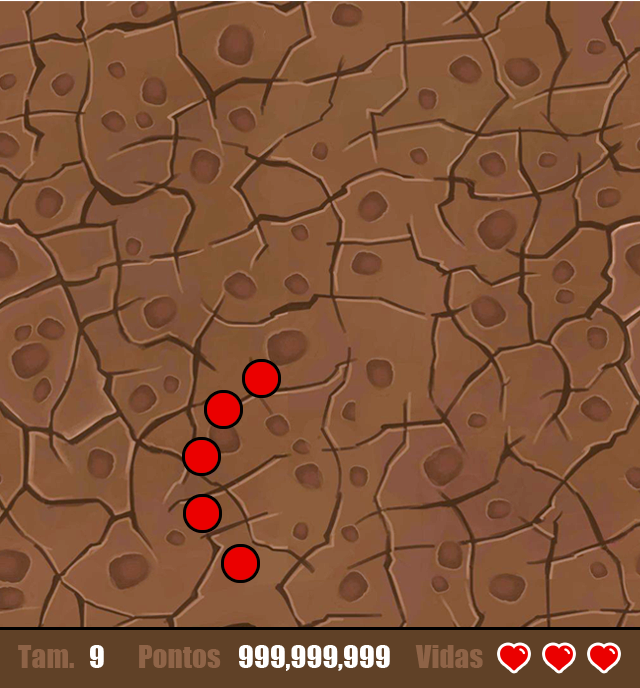
<style>
.page{position:relative;width:640px;height:688px}
.page>*{position:absolute;margin:0}
.t1{font:29.3px "Impact";color:#8e6347}
.t2{font:29.3px "Impact";color:#ffffff}
.t3{font:29.3px "Impact";color:#8f6448}
</style>
<div class="page">
<p class="t1" style="left:18px;top:645px;width:56px;height:23px">Tam.</p>
<p class="t2" style="left:90px;top:645px;width:14px;height:23px">9</p>
<p class="t3" style="left:139px;top:645px;width:82px;height:23px">Pontos</p>
<p class="t2" style="left:239px;top:645px;width:151px;height:26px">999,999,999</p>
<p class="t1" style="left:415px;top:645px;width:68px;height:23px">Vidas</p>
</div>
